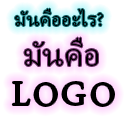
<style>
.page{position:relative;width:125px;height:125px;background:#ffffff}
.page>*{position:absolute;margin:0}
.t1{font:24px "AdobeThai-Regular";color:#000000}
.t2{font:40px "AdobeThai-Regular";color:#000000}
.t3{font:41.4px "AdobeThai-Regular";color:#000000}
</style>
<div class="page">
<p class="t1" style="left:15px;top:8px;width:88px;height:19px">มันคืออะไร?</p>
<p class="t2" style="left:24px;top:37px;width:74px;height:29px">มันคือ</p>
<p class="t3" style="left:12px;top:82px;width:18px;height:23px">L</p>
<p class="t3" style="left:34px;top:83px;width:23px;height:23px">O</p>
<p class="t3" style="left:62px;top:82px;width:24px;height:23px">G</p>
<p class="t3" style="left:91px;top:83px;width:23px;height:23px">O</p>
</div>
